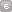
<style>
.page{position:relative;width:12px;height:12px;background:#aba5a5}
.page>*{position:absolute;margin:0}
.t1{font:8px "Kroeger0553";color:#ffffff}
</style>
<div class="page">
<p class="t1" style="left:4px;top:4px;width:5px;height:5px">6</p>
</div>
